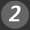
<style>
.page{position:relative;width:30px;height:30px;background:#666666}
.page>*{position:absolute;margin:0}
.t1{font:24px "Calibri";color:#ffffff;font-weight:bold;font-style:italic}
</style>
<div class="page">
<p class="t1" style="left:9px;top:5px;width:12px;height:17px">2</p>
</div>
